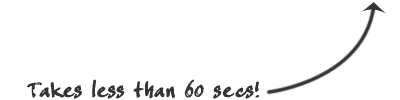
<style>
.page{position:relative;width:400px;height:100px;background:#ffffff}
.page>*{position:absolute;margin:0}
.t1{font:30px "CrappyJoe";color:#333333}
</style>
<div class="page">
<p class="t1" style="left:27px;top:79px;width:232px;height:20px">Takes less than 60 secs!</p>
</div>
